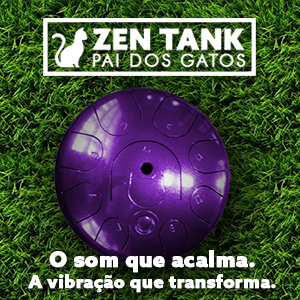
<style>
.page{position:relative;width:300px;height:300px}
.page>*{position:absolute;margin:0}
.t1{font:18px "AzoSans-Black";color:#ffffff;font-weight:bold}
.t2{font:21.7px "AzoSans-Black";color:#ffffff;font-weight:bold}
</style>
<div class="page">
<p class="t1" style="left:28px;top:250px;width:248px;height:43px;text-align:center"><span class="t2">O som que acalma.<br></span>A vibração que transforma.</p>
</div>
